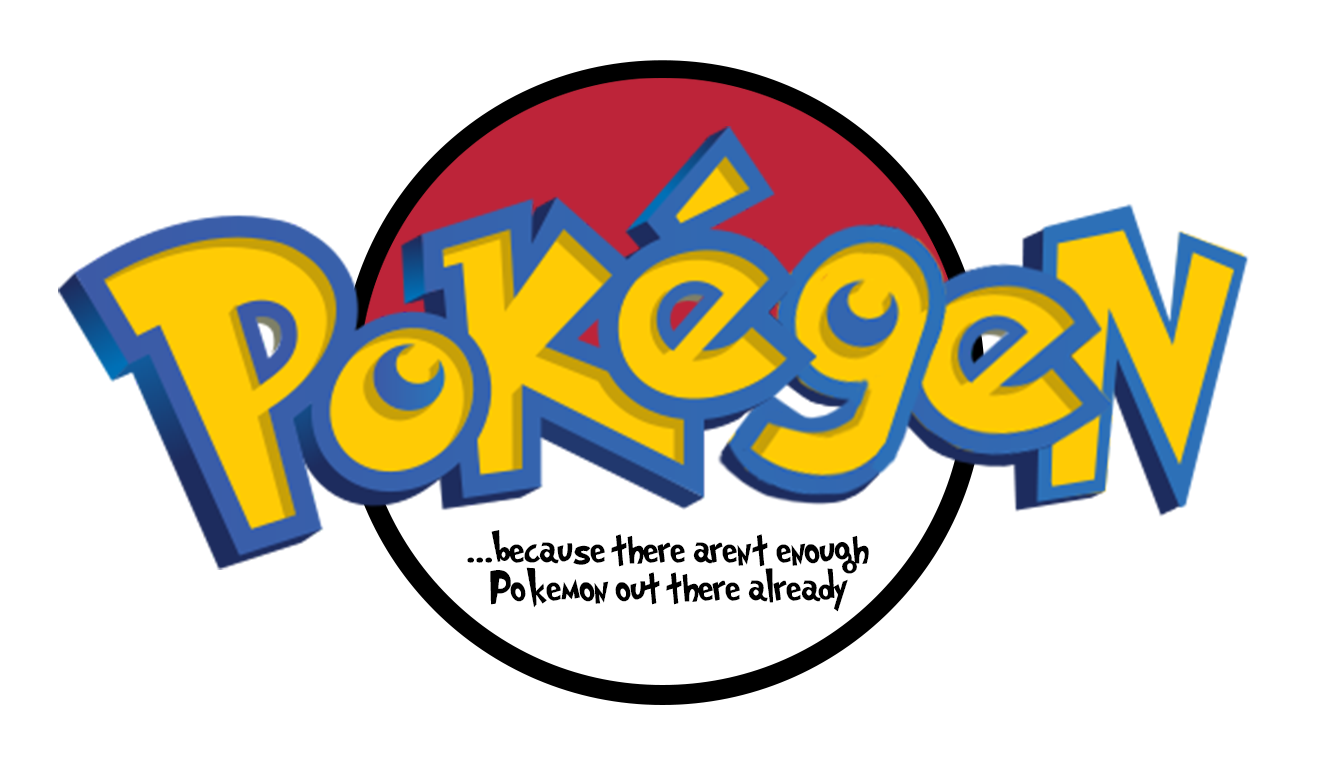
<style>
.page{position:relative;width:1324px;height:757px;background:#ffffff}
.page>*{position:absolute;margin:0}
.t1{font:40px/38px "Grinched";color:#000000}
</style>
<div class="page">
<p class="t1" style="left:467px;top:530px;width:402px;height:82px;text-align:center">...because there aren’t enough Pokemon out there already</p>
</div>
